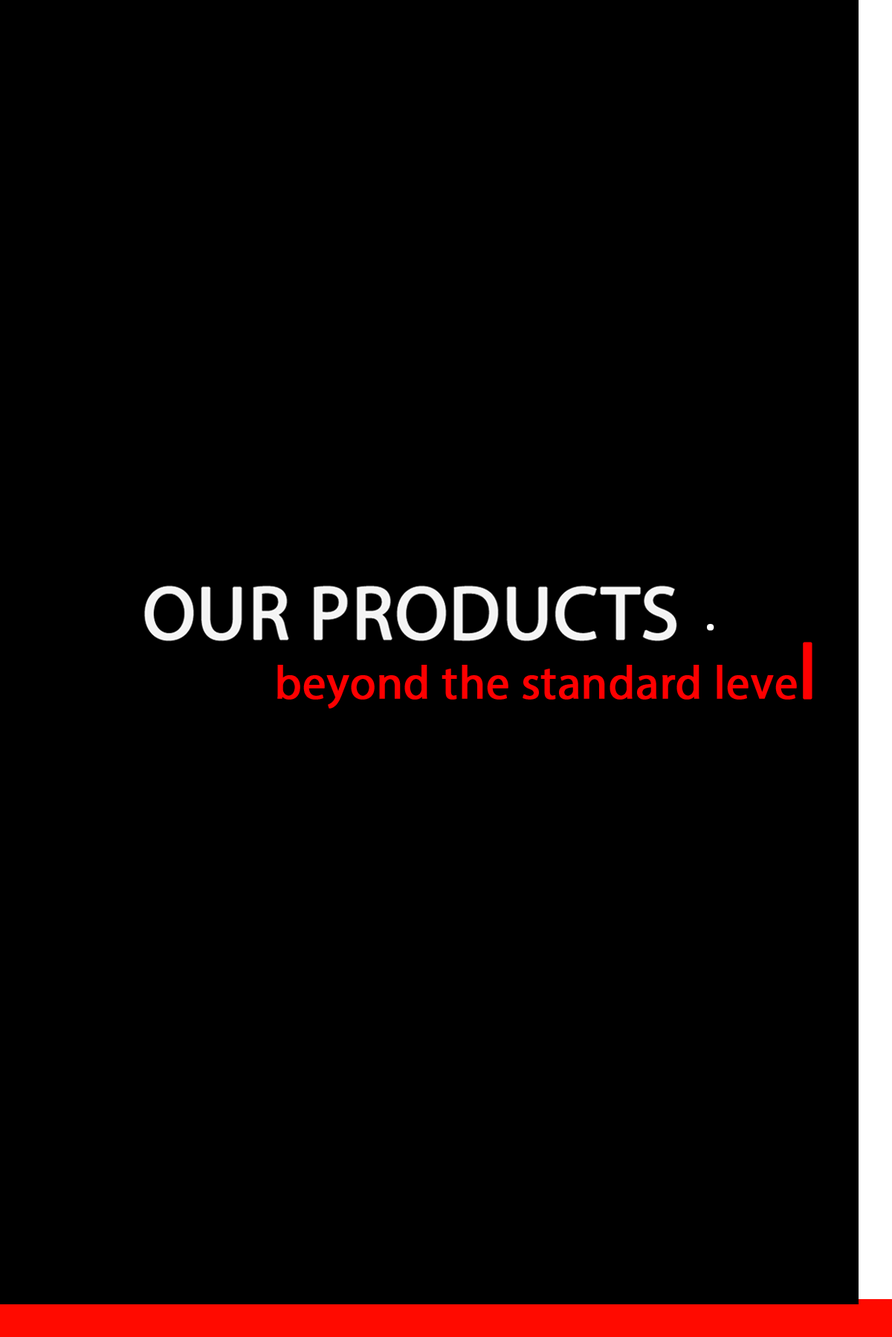
<style>
.page{position:relative;width:892px;height:1337px;background:#000000}
.page>*{position:absolute;margin:0}
.t1{font:46.4px "MyriadPro-Regular";color:#ffffff;font-weight:bold}
.t2{font:46.4px "MyriadPro-Regular";color:#fe0000;font-weight:bold}
.t3{font:77.4px "MyriadPro-Regular";color:#fe0000;font-weight:bold}
</style>
<div class="page">
<p class="t1" style="left:707px;top:624px;width:7px;height:7px">.</p>
<p class="t2" style="left:277px;top:642px;width:535px;height:67px">beyond the standard leve<span class="t3">l</span></p>
</div>
